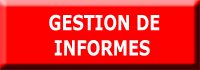
<style>
.page{position:relative;width:200px;height:70px;background:#ff0000}
.page>*{position:absolute;margin:0}
.t1{font:21px "Verdana-Bold";color:#ffffff;scale:0.76 1}
</style>
<div class="page">
<p class="t1" style="left:49px;top:14px;width:111px;height:42px">GESTION DE<br>     INFORMES</p>
</div>
